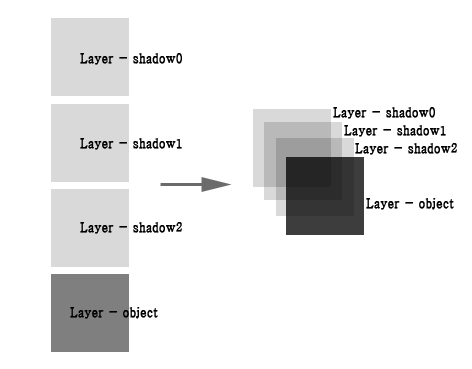
<style>
.page{position:relative;width:472px;height:369px;background:#ffffff}
.page>*{position:absolute;margin:0}
.t1{font:12px "Haansoft-Batang";color:#000000;font-weight:bold}
</style>
<div class="page">
<p class="t1" style="left:80px;top:53px;width:102px;height:12px">Layer - shadow0</p>
<p class="t1" style="left:333px;top:107px;width:102px;height:12px">Layer - shadow0</p>
<p class="t1" style="left:344px;top:125px;width:102px;height:12px">Layer - shadow1</p>
<p class="t1" style="left:80px;top:138px;width:102px;height:12px">Layer - shadow1</p>
<p class="t1" style="left:355px;top:143px;width:102px;height:12px">Layer - shadow2</p>
<p class="t1" style="left:366px;top:198px;width:88px;height:12px">Layer - object</p>
<p class="t1" style="left:80px;top:222px;width:102px;height:12px">Layer - shadow2</p>
<p class="t1" style="left:70px;top:307px;width:88px;height:12px">Layer - object</p>
</div>
